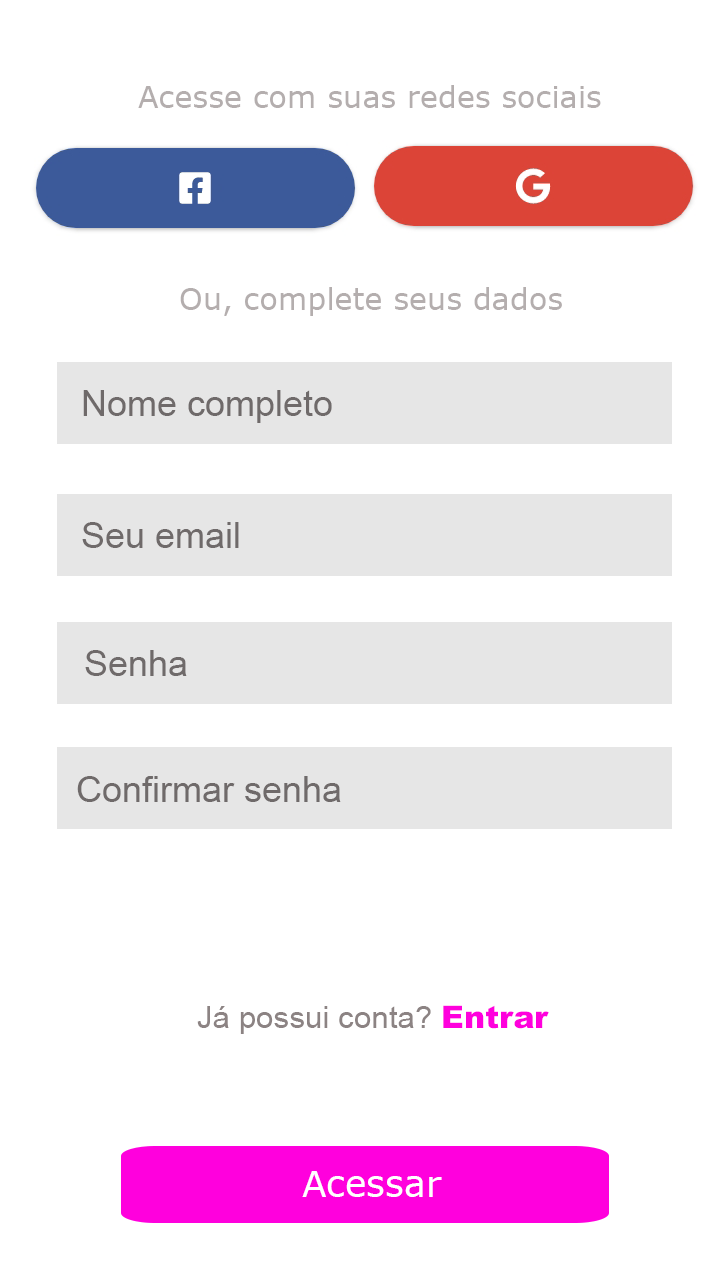
<style>
.page{position:relative;width:720px;height:1280px;background:#ffffff}
.page>*{position:absolute;margin:0}
.t1{font:30px "Verdana";color:#b4aeae}
.t2{font:36px "ArialMT";color:#6f6a6a}
.t3{font:31.3px "ArialMT";color:#8c8383}
.t4{font:31.3px "Arial-Black";color:#ff00dd}
.t5{font:36px "Verdana";color:#ffffff}
</style>
<div class="page">
<p class="t1" style="left:138px;top:85px;width:463px;height:23px">Acesse com suas redes sociais</p>
<p class="t1" style="left:180px;top:287px;width:382px;height:29px">Ou, complete seus dados</p>
<p class="t2" style="left:83px;top:390px;width:249px;height:33px">Nome completo</p>
<p class="t2" style="left:82px;top:522px;width:157px;height:26px">Seu email</p>
<p class="t2" style="left:85px;top:650px;width:102px;height:26px">Senha</p>
<p class="t2" style="left:77px;top:776px;width:264px;height:26px">Confirmar senha</p>
<p class="t3" style="left:197px;top:1005px;width:352px;height:29px">Já possui conta? <span class="t4">Entrar</span></p>
<p class="t5" style="left:302px;top:1171px;width:140px;height:26px">Acessar</p>
</div>
